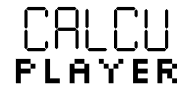
<style>
.page{position:relative;width:192px;height:90px;background:#ffffff}
.page>*{position:absolute;margin:0}
.t1{font:70px "Calculator";color:#000000}
.t2{font:41px "Silkscreen";color:#000000}
</style>
<div class="page">
<p class="t1" style="left:24px;top:6px;width:145px;height:46px">CALCU</p>
<p class="t2" style="left:15px;top:58px;width:162px;height:26px">PLAYER</p>
</div>
